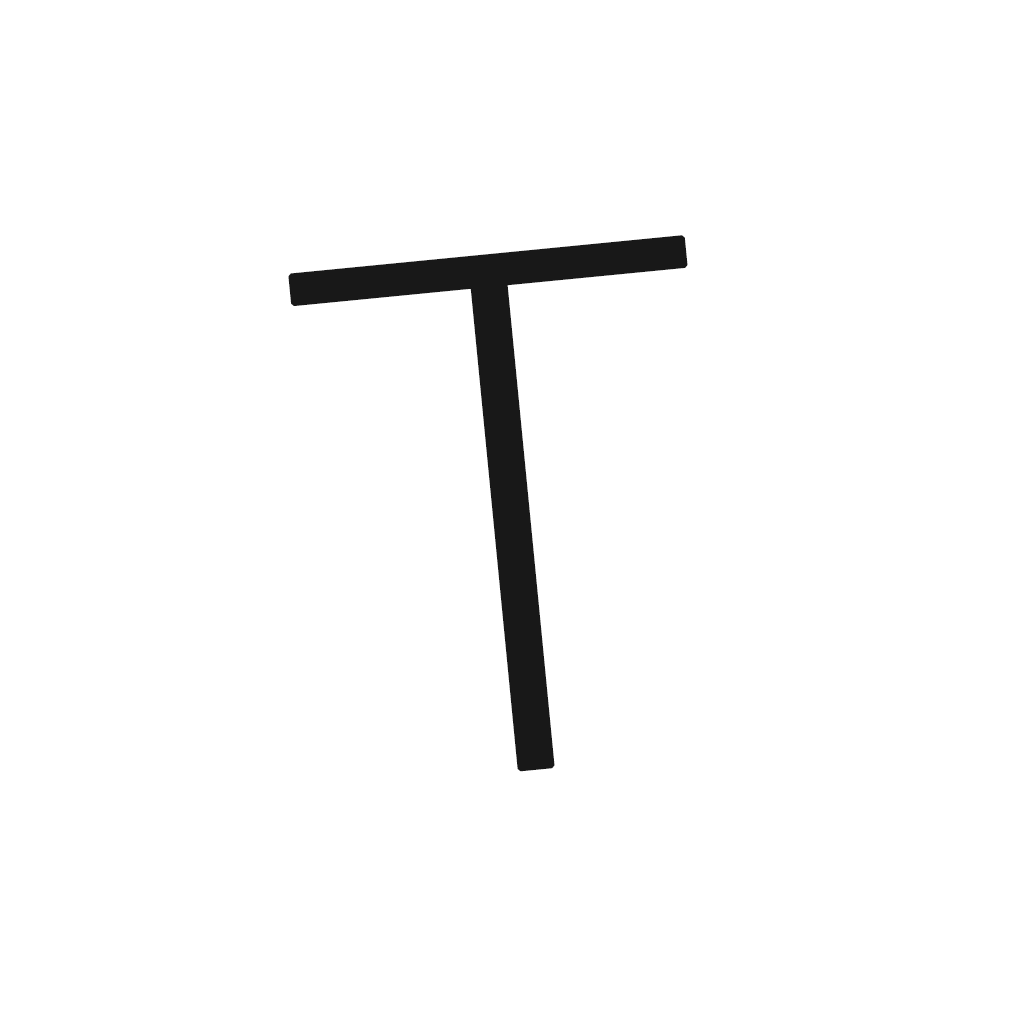
<style>
.page{position:relative;width:1024px;height:1024px;background:#ffffff}
.page>*{position:absolute;margin:0}
.t1{font:717.6px "HelveticaNeue-Thin";color:#181818;font-weight:bold}
</style>
<div class="page">
<p class="t1" style="left:288px;top:235px;width:400px;height:537px;rotate:-6deg">T</p>
</div>
